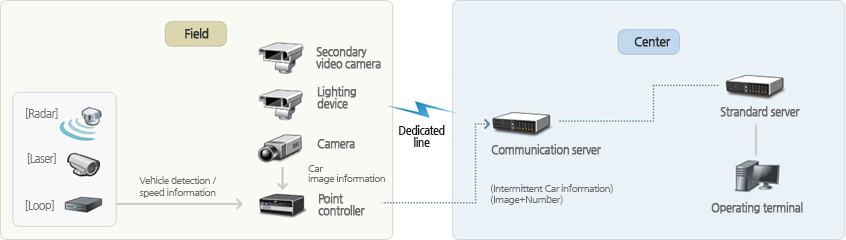
<style>
.page{position:relative;width:846px;height:240px;background:#f9faf4}
.page>*{position:absolute;margin:0}
.t1{font:12px "NanumGothic";letter-spacing:-0.05em;color:#313131;font-weight:bold}
.t2{font:11px/12px "NanumGothic";letter-spacing:-0.05em;color:#6b6b6b;font-weight:bold}
.t3{font:11px "NanumGothic";letter-spacing:-0.05em;color:#6e6e6e}
.t4{font:11px "NanumGothic";letter-spacing:-0.05em;color:#6b6b6b;font-weight:bold}
.t5{font:11px/12px "NanumGothicBold";letter-spacing:-0.05em;color:#1a1a1a}
.t6{font:10px/10px "NanumGothic";letter-spacing:-0.05em;color:#6e6e6e}
.t7{font:10px/12px "NanumGothic";letter-spacing:-0.05em;color:#6e6e6e}
.t8{font:10px "NanumGothic";letter-spacing:-0.05em;color:#6e6e6e}
</style>
<div class="page">
<p class="t1" style="left:185px;top:28px;width:24px;height:11px">Field</p>
<p class="t1" style="left:634px;top:37px;width:37px;height:10px">Center</p>
<p class="t2" style="left:316px;top:46px;width:65px;height:23px">Secondary<br>video camera</p>
<p class="t2" style="left:317px;top:86px;width:39px;height:23px">Lighting<br>device</p>
<p class="t3" style="left:26px;top:108px;width:32px;height:11px">[Radar]</p>
<p class="t4" style="left:720px;top:106px;width:80px;height:11px">Strandard server</p>
<p class="t5" style="left:399px;top:125px;width:46px;height:22px;text-align:center">Dedicated<br>line</p>
<p class="t4" style="left:317px;top:139px;width:38px;height:10px">Camera</p>
<p class="t4" style="left:491px;top:144px;width:110px;height:11px">Communication server</p>
<p class="t3" style="left:27px;top:153px;width:29px;height:11px">[Laser]</p>
<p class="t6" style="left:308px;top:165px;width:78px;height:19px">Car<br>image information</p>
<p class="t7" style="left:139px;top:176px;width:78px;height:22px;text-align:center">Vehicle detection /<br>speed information</p>
<p class="t8" style="left:491px;top:184px;width:122px;height:10px">(Intermittent Car information)</p>
<p class="t2" style="left:318px;top:193px;width:47px;height:23px">Point<br>controller</p>
<p class="t8" style="left:491px;top:195px;width:72px;height:10px">(Image+Number)</p>
<p class="t3" style="left:25px;top:200px;width:29px;height:11px">[Loop]</p>
<p class="t4" style="left:711px;top:202px;width:92px;height:12px">Operating terminal</p>
</div>
